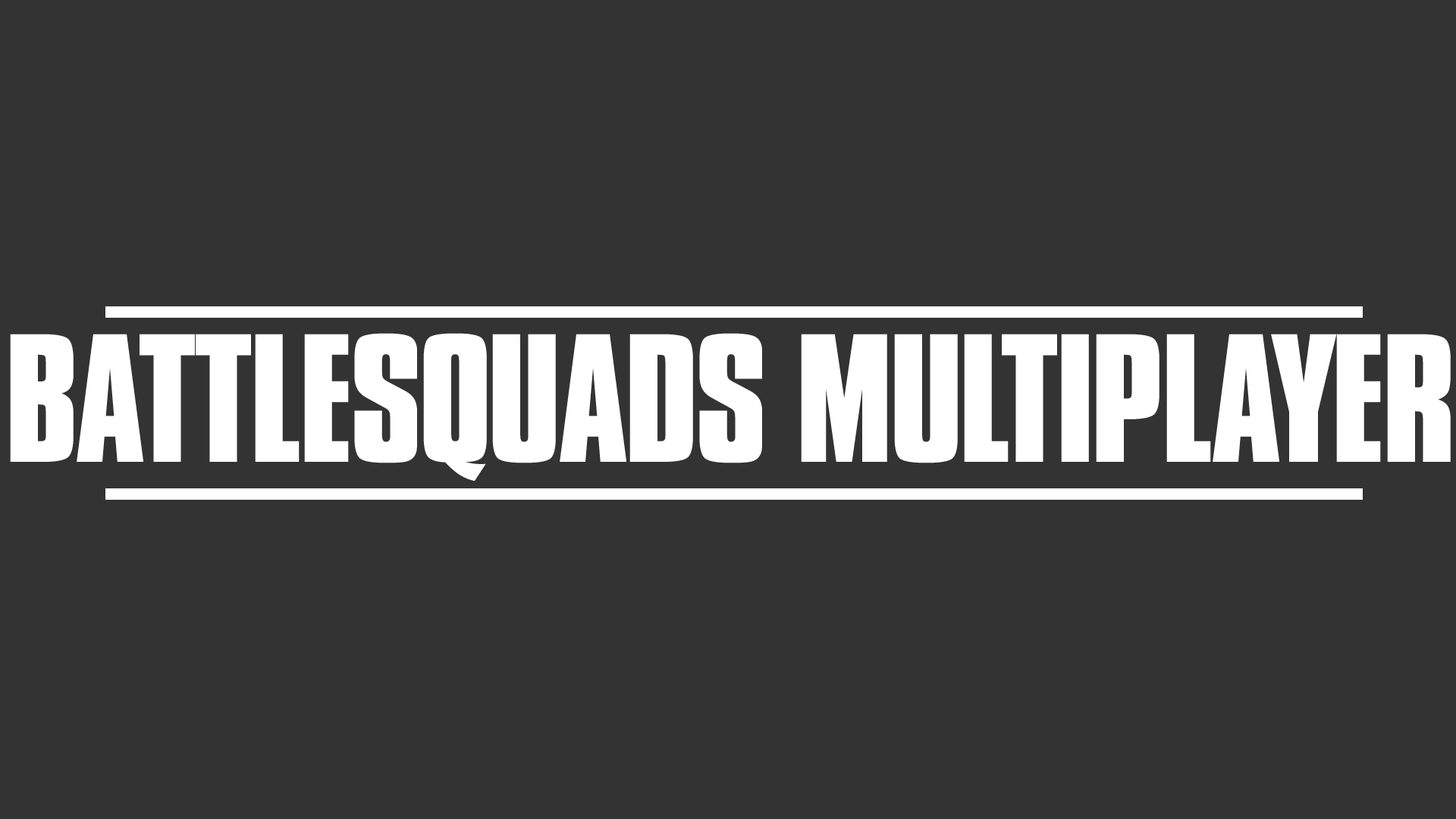
<style>
.page{position:relative;width:1456px;height:819px;background:#333333}
.page>*{position:absolute;margin:0}
.t1{font:157.1px "CompactaBT-Bold";letter-spacing:-0.025em;color:#ffffff;text-transform:uppercase}
</style>
<div class="page">
<p class="t1" style="left:10px;top:333px;width:1441px;height:148px">battlesquads multiplayer</p>
</div>
